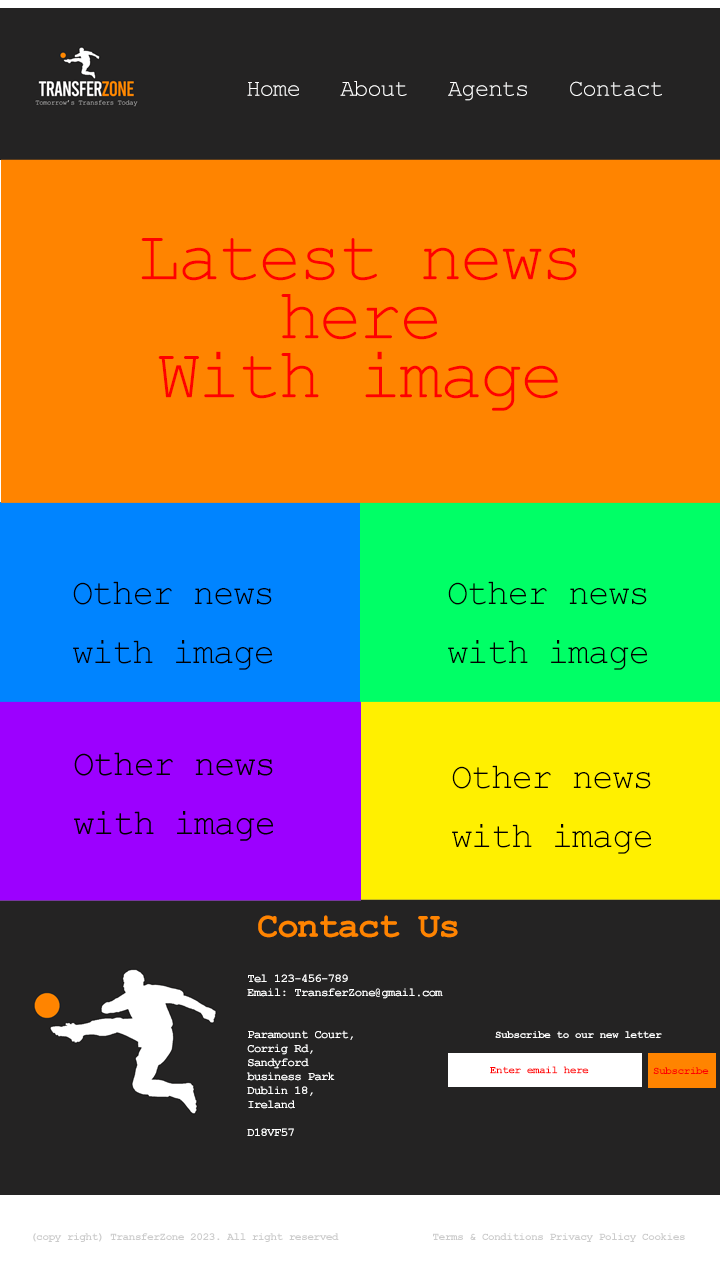
<style>
.page{position:relative;width:720px;height:1280px;background:#242323}
.page>*{position:absolute;margin:0}
.t1{font:24px "CourierNewPSMT";letter-spacing:-0.04em;color:#ffffff}
.t2{font:72px/59px "CourierNewPSMT";letter-spacing:-0.04em;color:#ff0000}
.t3{font:36px/59px "CourierNewPSMT";letter-spacing:-0.04em;color:#000000}
.t4{font:36px "CourierNewPS-BoldMT";letter-spacing:-0.04em;color:#ff8400}
.t5{font:12px/14px "CourierNewPS-BoldMT";letter-spacing:-0.04em;color:#ffffff}
.t6{font:11px "CourierNewPS-BoldMT";letter-spacing:-0.04em;color:#ffffff}
.t7{font:11px "CourierNewPS-BoldMT";letter-spacing:-0.04em;color:#ff0000}
.t8{font:11px "CourierNewPS-BoldMT";letter-spacing:-0.04em;color:#cccccc}
</style>
<div class="page">
<p class="t1" style="left:247px;top:81px;width:415px;height:20px">Home   About   Agents   Contact</p>
<p class="t2" style="left:141px;top:238px;width:436px;height:173px;text-align:center">Latest news here<br>With image</p>
<p class="t3" style="left:73px;top:581px;width:199px;height:89px;text-align:center">Other news with image</p>
<p class="t3" style="left:448px;top:581px;width:199px;height:89px;text-align:center">Other news with image</p>
<p class="t3" style="left:452px;top:765px;width:199px;height:89px;text-align:center">Other news with image</p>
<p class="t4" style="left:258px;top:915px;width:200px;height:23px">Contact Us</p>
<p class="t5" style="left:247px;top:974px;width:196px;height:162px">Tel 123-456-789<br>Email: TransferZone@gmail.com<br><br><br>Paramount Court,<br>Corrig Rd,<br>Sandyford <br>business Park<br>Dublin 18,<br>Ireland<br><br>D18VF57</p>
<p class="t6" style="left:495px;top:1031px;width:167px;height:7px">Subscribe to our new letter</p>
<p class="t7" style="left:490px;top:1066px;width:99px;height:8px">Enter email here</p>
<p class="t7" style="left:653px;top:1067px;width:56px;height:7px">Subscribe</p>
<p class="t8" style="left:33px;top:1233px;width:306px;height:9px">(copy right) TransferZone 2023. All right reserved</p>
<p class="t8" style="left:433px;top:1233px;width:252px;height:9px">Terms &amp; Conditions Privacy Policy Cookies</p>
</div>
